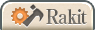
<style>
.page{position:relative;width:95px;height:30px}
.page>*{position:absolute;margin:0}
.t1{font:20px "RyuminPro-ExBold";letter-spacing:-0.08em;color:#6e6b64;scale:0.9 1}
</style>
<div class="page">
<p class="t1" style="left:46px;top:9px;width:41px;height:15px">Rakit</p>
</div>
